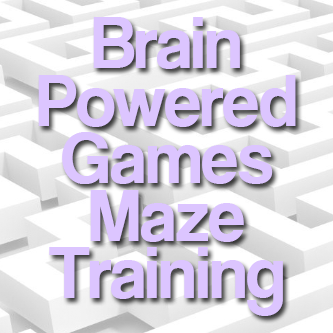
<style>
.page{position:relative;width:333px;height:333px;background:#dcc5ff}
.page>*{position:absolute;margin:0}
.t1{font:73.6px/57.4px "CoolveticaRg-Regular";color:#dcc5ff}
</style>
<div class="page">
<p class="t1" style="left:38px;top:17px;width:258px;height:299px;text-align:center">Brain<br>Powered<br>Games<br>Maze<br>Training</p>
</div>
